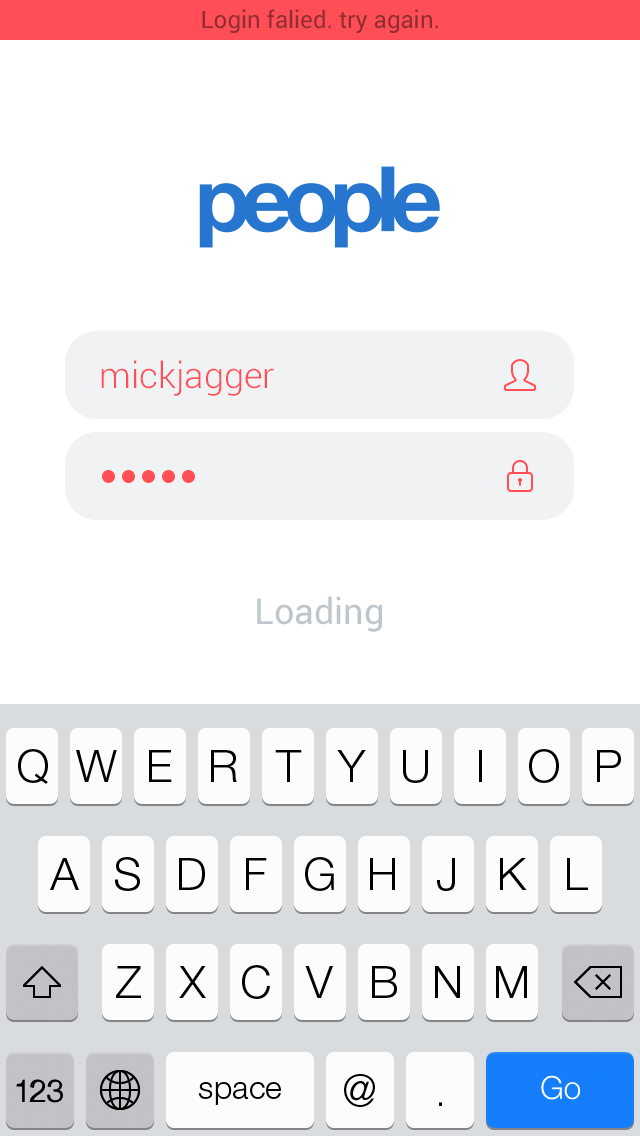
<style>
.page{position:relative;width:640px;height:1136px;background:#ffffff}
.page>*{position:absolute;margin:0}
.t1{font:24px "Roboto-Regular";color:#912c30}
.t2{font:36px "Roboto-Light";color:#ff4e56}
.t3{font:36px "Roboto-Regular";color:#bec6cb}
</style>
<div class="page">
<p class="t1" style="left:202px;top:9px;width:236px;height:24px">Login falied. try again.</p>
<p class="t2" style="left:101px;top:360px;width:173px;height:36px">mickjagger</p>
<p class="t2" style="left:101px;top:360px;width:173px;height:36px">mickjagger</p>
<p class="t3" style="left:257px;top:596px;width:125px;height:36px">Loading</p>
</div>
